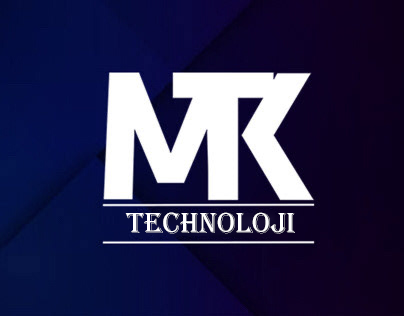
<style>
.page{position:relative;width:404px;height:316px}
.page>*{position:absolute;margin:0}
.t1{font:30px "Algerian";color:#ffffff}
</style>
<div class="page">
<p class="t1" style="left:125px;top:212px;width:170px;height:22px">TECHNOLOJI</p>
</div>
